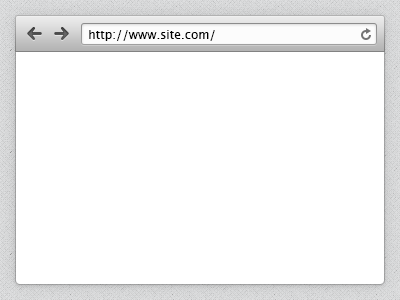
<style>
.page{position:relative;width:400px;height:300px;background:#ffffff}
.page>*{position:absolute;margin:0}
.t1{font:12px "LucidaGrande";color:#000000}
</style>
<div class="page">
<p class="t1" style="left:89px;top:30px;width:126px;height:11px">http://www.site.com/</p>
</div>
